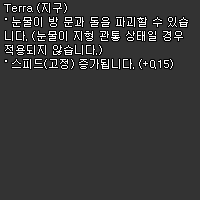
<style>
.page{position:relative;width:200px;height:200px;background:#333333}
.page>*{position:absolute;margin:0}
.t1{font:11px/14px "Dotum";color:#ffffff}
</style>
<div class="page">
<p class="t1" style="left:4px;top:3px;width:184px;height:66px">Terra (지구)<br>˚ 눈물이 방 문과 돌을 파괴할 수 있습<br>니다. (눈물이 지형 관통 상태일 경우<br>적용되지 않습니다.)<br>˚ 스피드(고정) 증가됩니다. (+0.15)</p>
</div>
